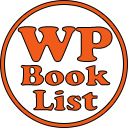
<style>
.page{position:relative;width:128px;height:128px;background:#ffffff}
.page>*{position:absolute;margin:0}
.t1{font:51.4px "CooperBlack";color:#f05a1a;scale:1.08 1}
.t2{font:30px/25px "CooperBlack";scale:1.13 1}
</style>
<div class="page">
<p class="t1" style="left:17px;top:26px;width:96px;height:36px">WP</p>
<p class="t2" style="left:20px;top:65px;width:91px;height:46px;text-align:center">Book<br>List</p>
</div>
